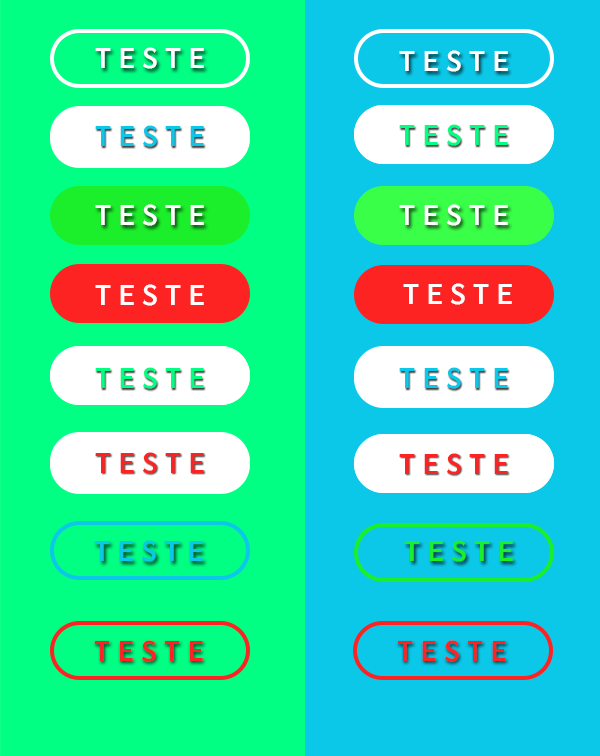
<style>
.page{position:relative;width:600px;height:756px;background:#00ff83}
.page>*{position:absolute;margin:0}
.t1{font:32px "Inconsolata-Bold";letter-spacing:0.23em;color:#ffffff}
.t2{font:32px "Inconsolata-Bold";letter-spacing:0.23em;color:#0cc8e8}
.t3{font:32px "Inconsolata-Bold";letter-spacing:0.23em;color:#00ff83}
.t4{font:32px "Inconsolata-Bold";letter-spacing:0.23em}
.t5{font:32px "Inconsolata-Bold";letter-spacing:0.23em;color:#fe2323}
</style>
<div class="page">
<p class="t1" style="left:399px;top:50px;width:109px;height:22px">TESTE</p>
<p class="t2" style="left:95px;top:124px;width:109px;height:22px">TESTE</p>
<p class="t2" style="left:95px;top:125px;width:109px;height:22px">TESTE</p>
<p class="t3" style="left:399px;top:123px;width:109px;height:22px">TESTE</p>
<p class="t3" style="left:399px;top:124px;width:109px;height:22px">TESTE</p>
<p class="t1" style="left:95px;top:204px;width:109px;height:22px">TESTE</p>
<p class="t1" style="left:399px;top:204px;width:109px;height:22px">TESTE</p>
<p class="t1" style="left:95px;top:284px;width:109px;height:22px">TESTE</p>
<p class="t1" style="left:403px;top:283px;width:109px;height:22px">TESTE</p>
<p class="t3" style="left:95px;top:367px;width:109px;height:22px">TESTE</p>
<p class="t2" style="left:399px;top:367px;width:109px;height:22px">TESTE</p>
<p class="t4" style="left:95px;top:450px;width:109px;height:22px">TESTE</p>
<p class="t5" style="left:95px;top:452px;width:109px;height:22px">TESTE</p>
<p class="t5" style="left:399px;top:452px;width:109px;height:22px">TESTE</p>
<p class="t5" style="left:399px;top:453px;width:109px;height:22px">TESTE</p>
<p class="t2" style="left:94px;top:540px;width:109px;height:22px">TESTE</p>
<p class="t5" style="left:94px;top:640px;width:109px;height:22px">TESTE</p>
<p class="t5" style="left:397px;top:640px;width:109px;height:22px">TESTE</p>
</div>
